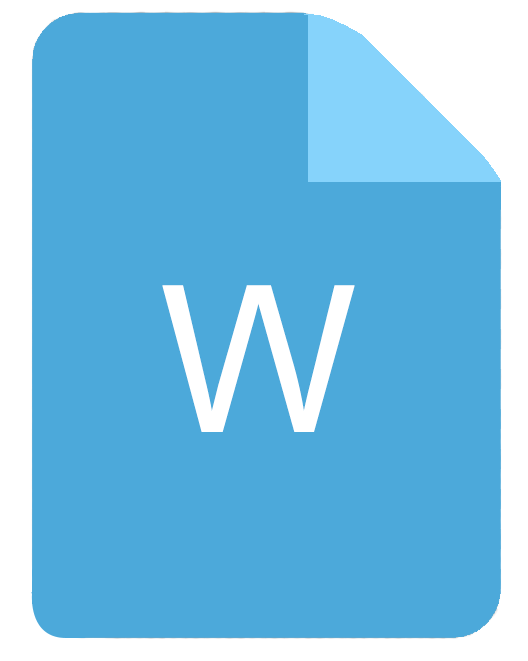
<style>
.page{position:relative;width:528px;height:661px;background:#4ca9da}
.page>*{position:absolute;margin:0}
.t1{font:204.6px "ArialMT";color:#ffffff}
</style>
<div class="page">
<p class="t1" style="left:162px;top:285px;width:193px;height:147px">W</p>
</div>
